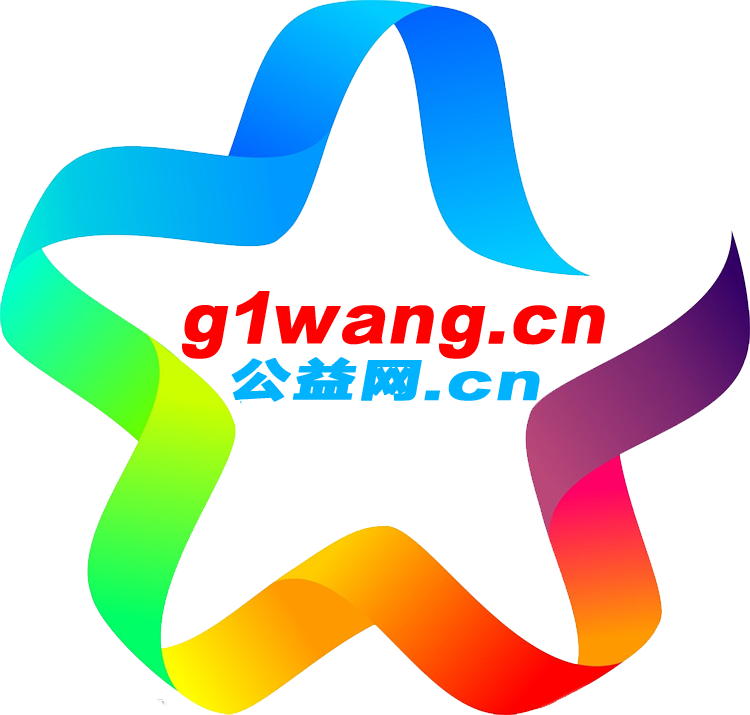
<style>
.page{position:relative;width:750px;height:715px;background:#ffffff}
.page>*{position:absolute;margin:0}
.t1{font:60px "FZLTTHJW--GB1-0";letter-spacing:0.06em;color:#fe0000;font-weight:bold;font-style:italic}
.t2{font:60px "FZLTTHBJW--GB1-0";letter-spacing:0.06em;color:#01b2fe;font-weight:bold;font-style:italic}
</style>
<div class="page">
<p class="t1" style="left:182px;top:291px;width:423px;height:68px">g1wang.cn</p>
<p class="t2" style="left:231px;top:357px;width:309px;height:45px">公益网.cn</p>
</div>
